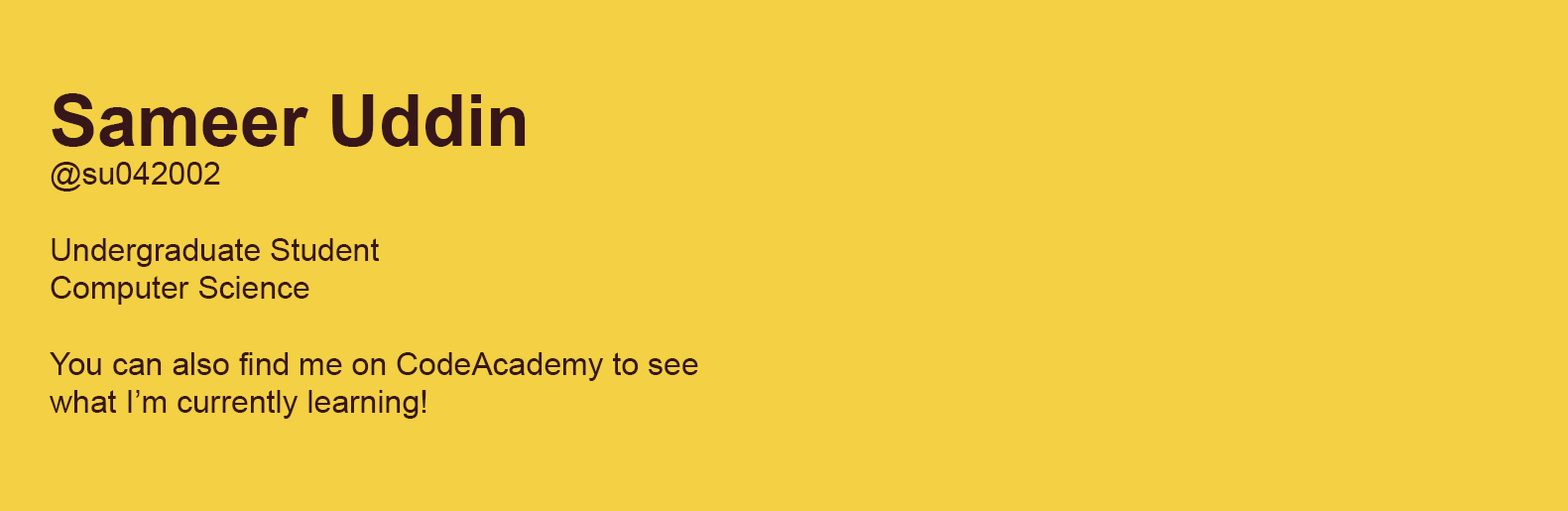
<style>
.page{position:relative;width:1568px;height:511px;background:#f4d044}
.page>*{position:absolute;margin:0}
.t1{font:31.7px "ArialMT";color:#361619}
.t2{font:71.5px "Arial-BoldMT";color:#361619}
</style>
<div class="page">
<p class="t1" style="left:49px;top:93px;width:649px;height:326px"><span class="t2">Sameer Uddin<br></span>@su042002<br><br>Undergraduate Student<br>Computer Science<br><br>You can also find me on CodeAcademy to see what I’m currently learning!</p>
</div>
